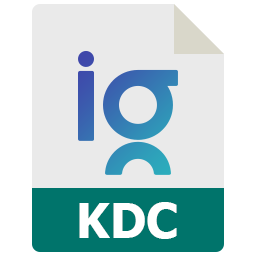
<style>
.page{position:relative;width:256px;height:256px;background:#eaeaea}
.page>*{position:absolute;margin:0}
.t1{font:48px "Tahoma-Bold";color:#ffffff}
</style>
<div class="page">
<p class="t1" style="left:79px;top:202px;width:98px;height:37px">KDC</p>
</div>
